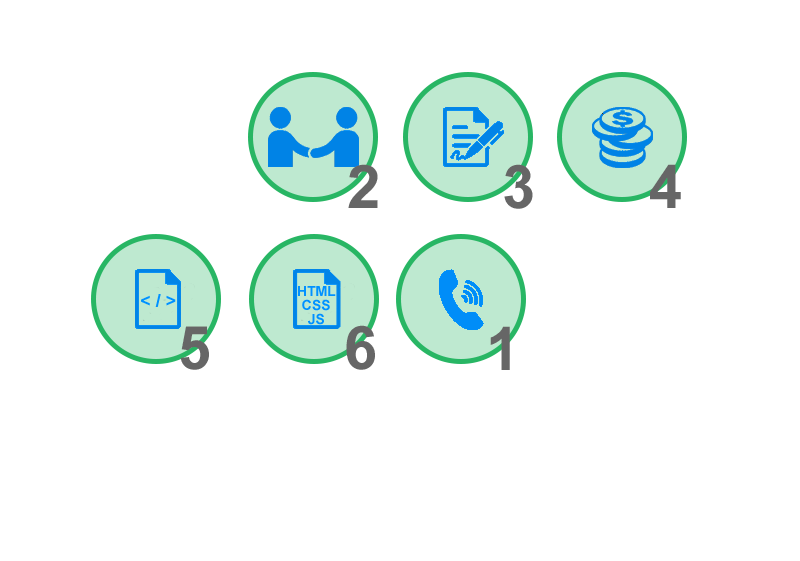
<style>
.page{position:relative;width:800px;height:561px;background:#ffffff}
.page>*{position:absolute;margin:0}
.t1{font:60px "Arial-BoldMT";color:#666666}
.t2{font:18px "Arial-BoldMT";color:#0091ff}
.t3{font:14px/14px "Arial-BoldMT";color:#0091ff}
</style>
<div class="page">
<p class="t1" style="left:348px;top:164px;width:30px;height:44px">2</p>
<p class="t1" style="left:504px;top:164px;width:29px;height:45px">3</p>
<p class="t1" style="left:650px;top:164px;width:31px;height:44px">4</p>
<p class="t2" style="left:141px;top:294px;width:35px;height:13px">&lt; / &gt;</p>
<p class="t3" style="left:298px;top:286px;width:38px;height:39px;text-align:center">HTML<br>CSS<br>JS</p>
<p class="t1" style="left:180px;top:326px;width:29px;height:44px">5</p>
<p class="t1" style="left:346px;top:325px;width:29px;height:45px">6</p>
<p class="t1" style="left:490px;top:326px;width:20px;height:44px">1</p>
</div>
